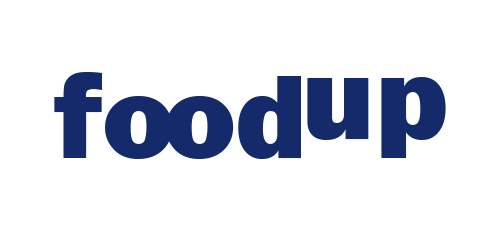
<style>
.page{position:relative;width:500px;height:250px;background:#ffffff}
.page>*{position:absolute;margin:0}
.t1{font:122.6px "FranklinGothic-Heavy";color:#142a6b}
.t2{font:122.6px "FranklinGothic-Heavy";letter-spacing:-0.1em;color:#142a6b}
.t3{font:122.4px "FranklinGothic-Heavy";color:#142a6b}
</style>
<div class="page">
<p class="t1" style="left:54px;top:72px;width:247px;height:87px">f<span class="t2">o</span>od</p>
<p class="t3" style="left:307px;top:77px;width:139px;height:81px">up</p>
</div>
